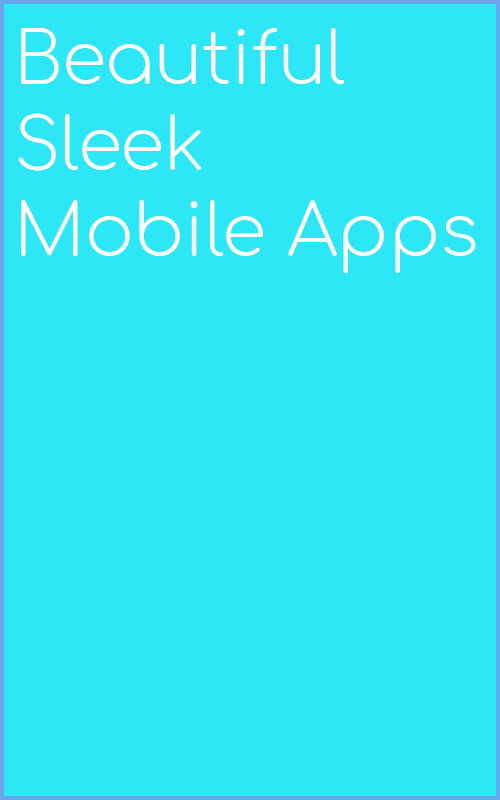
<style>
.page{position:relative;width:500px;height:800px;background:#2de7f6}
.page>*{position:absolute;margin:0}
.t1{font:72px "Comfortaa-Light";color:#ffffff}
</style>
<div class="page">
<p class="t1" style="left:18px;top:28px;width:458px;height:245px">Beautiful<br>Sleek<br>Mobile Apps</p>
</div>
